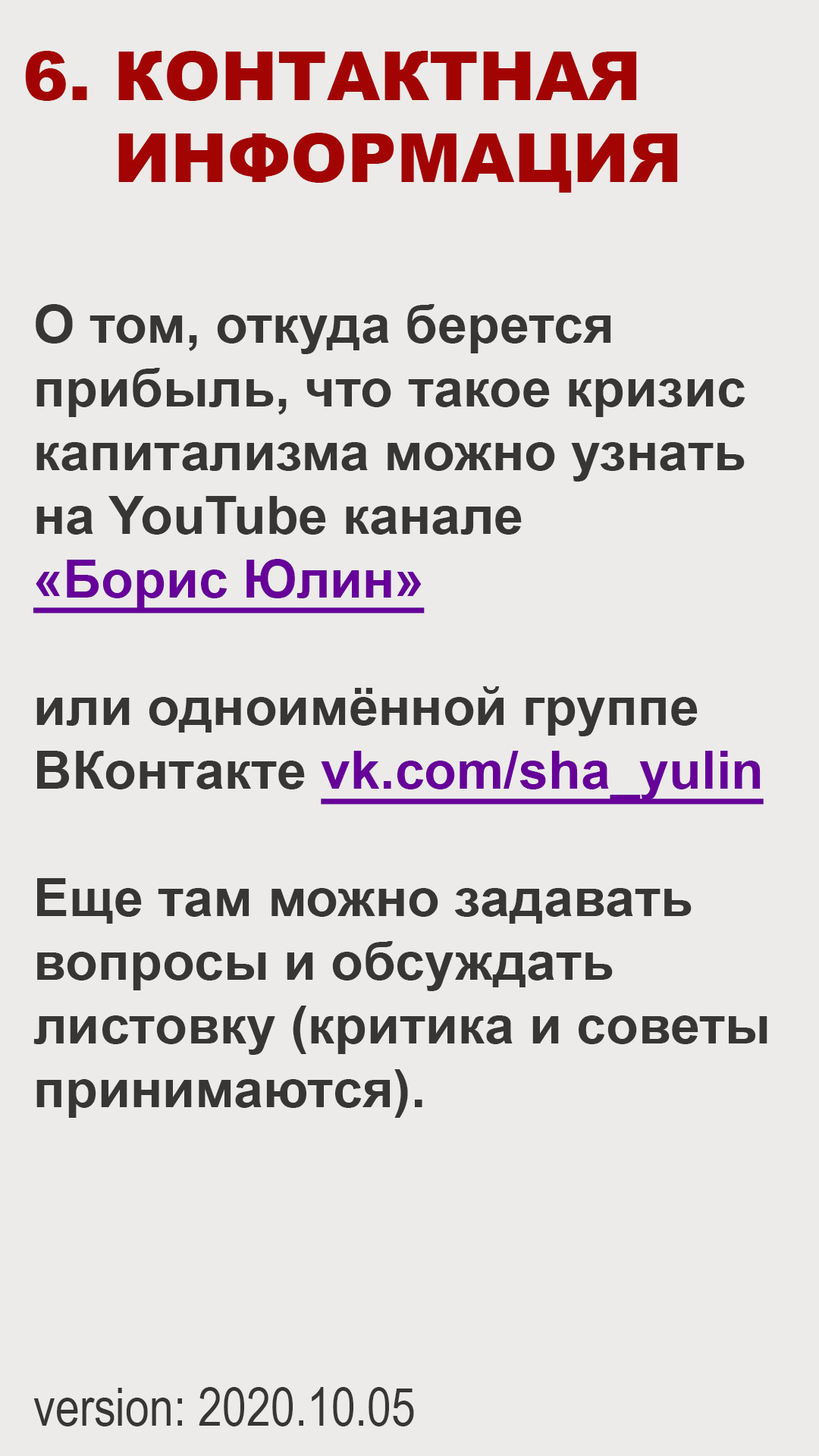
<style>
.page{position:relative;width:819px;height:1456px;background:#ecebe9}
.page>*{position:absolute;margin:0}
.t1{font:68.2px "Arial-Black";color:#a20403}
.t2{font:53.1px "Arial-BoldMT";color:#373634}
.t3{font:53.1px "Arial-BoldMT";color:#660099;text-decoration:underline}
.t4{font:53.1px "ArialNarrow";color:#373634}
</style>
<div class="page">
<p class="t1" style="left:25px;top:51px;width:653px;height:142px">6. КОНТАКТНАЯ<br>    ИНФОРМАЦИЯ</p>
<p class="t2" style="left:33px;top:304px;width:734px;height:1122px">О том, откуда берется <br>прибыль, что такое кризис<br>капитализма можно узнать<br>на YouTube канале<br><span class="t3">«Борис Юлин»<br></span><br>или одноимённой группе <br>ВКонтакте <span class="t3">vk.com/sha_yulin<br></span><br>Еще там можно задавать<br>вопросы и обсуждать <br>листовку (критика и советы<br>принимаются).<br><br><br><br><br><span class="t4">version: 2020.10.05</span></p>
</div>
